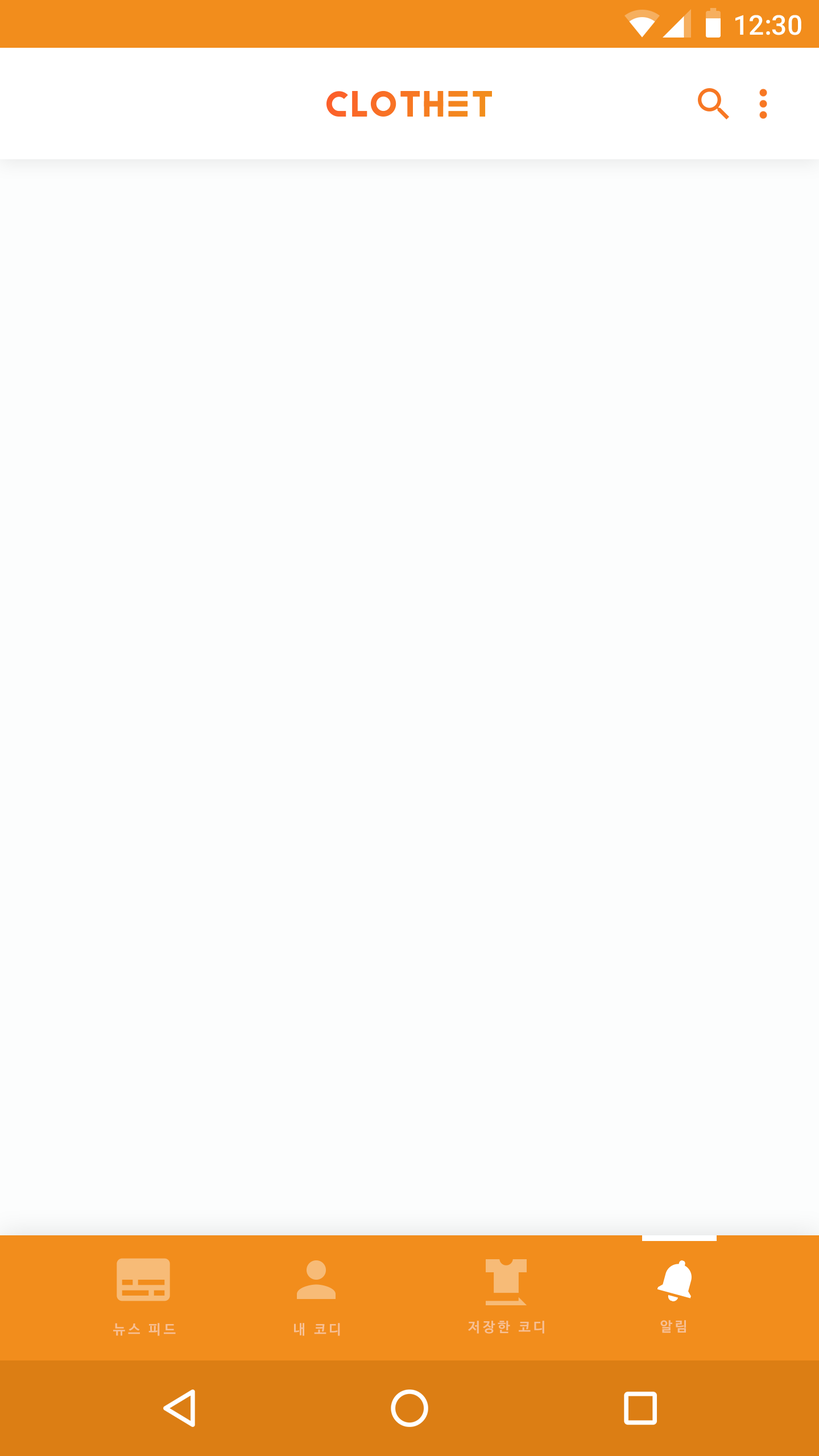
<style>
.page{position:relative;width:819px;height:1456px;background:#fcfdfd}
.page>*{position:absolute;margin:0}
.t1{font:27.3px "Roboto-Medium";color:#ffffff}
.t2{font:13.6px "NanumBarunGothicBold";letter-spacing:0.2em;color:#f7c093}
</style>
<div class="page">
<p class="t1" style="left:735px;top:15px;width:66px;height:20px">12:30</p>
<p class="t2" style="left:113px;top:1323px;width:63px;height:13px">뉴스 피드</p>
<p class="t2" style="left:294px;top:1323px;width:46px;height:13px">내 코디</p>
<p class="t2" style="left:468px;top:1321px;width:76px;height:13px">저장한 코디</p>
<p class="t2" style="left:660px;top:1320px;width:26px;height:13px">알림</p>
</div>
